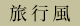
<style>
.page{position:relative;width:80px;height:26px;background:#c6c19d}
.page>*{position:absolute;margin:0}
.t1{font:18.2px "NotoSerifCJKtc-Medium";letter-spacing:0.2em;color:#000000}
</style>
<div class="page">
<p class="t1" style="left:9px;top:4px;width:61px;height:18px">旅行風</p>
</div>
